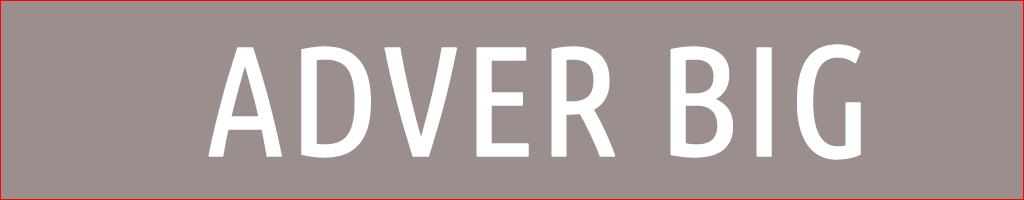
<style>
.page{position:relative;width:1024px;height:200px;background:#9a8f8d}
.page>*{position:absolute;margin:0}
.t1{font:156.4px "UbuntuCondensed-Regular";color:#ffffff;font-weight:bold}
</style>
<div class="page">
<p class="t1" style="left:208px;top:44px;width:653px;height:116px">ADVER BIG</p>
</div>
